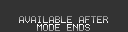
<style>
.page{position:relative;width:128px;height:32px;background:#333333}
.page>*{position:absolute;margin:0}
.t1{font:10px "Terminal"}
</style>
<div class="page">
<p class="t1" style="left:19px;top:16px;width:89px;height:7px">AVAILABLE AFTER</p>
<p class="t1" style="left:37px;top:24px;width:53px;height:7px">MODE ENDS</p>
</div>
